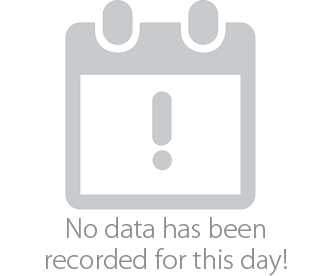
<style>
.page{position:relative;width:328px;height:276px;background:#ffffff}
.page>*{position:absolute;margin:0}
.t1{font:26px "KozGoPr6N-Light";color:#8d8d8d}
</style>
<div class="page">
<p class="t1" style="left:45px;top:217px;width:242px;height:59px;text-align:center">No data has been<br>recorded for this day!</p>
</div>
